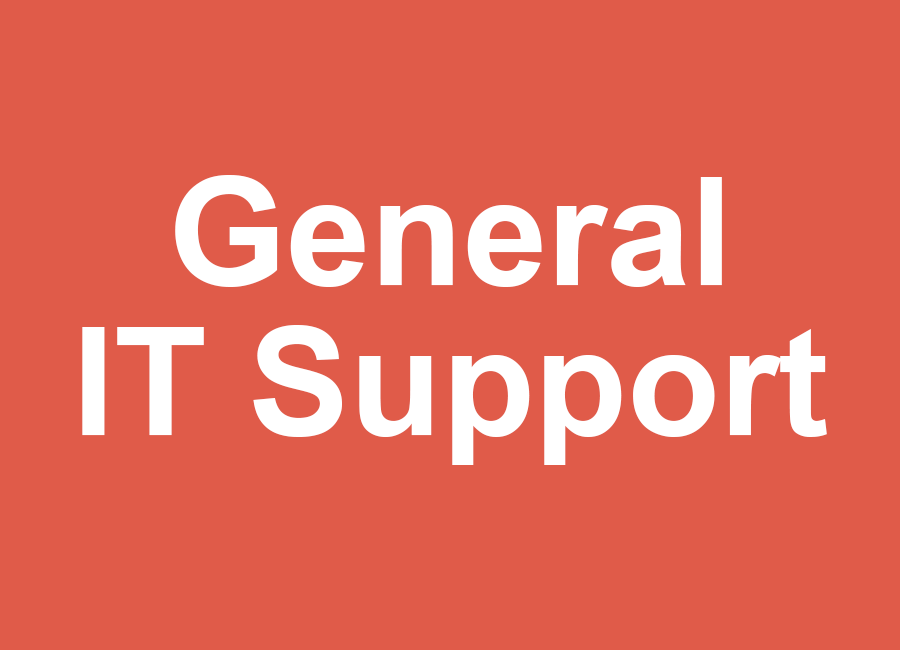
<style>
.page{position:relative;width:900px;height:650px;background:#e05b49}
.page>*{position:absolute;margin:0}
.t1{font:150px/150px "Arial-BoldMT";color:#ffffff}
</style>
<div class="page">
<p class="t1" style="left:82px;top:175px;width:745px;height:290px;text-align:center">General<br>IT Support</p>
</div>
